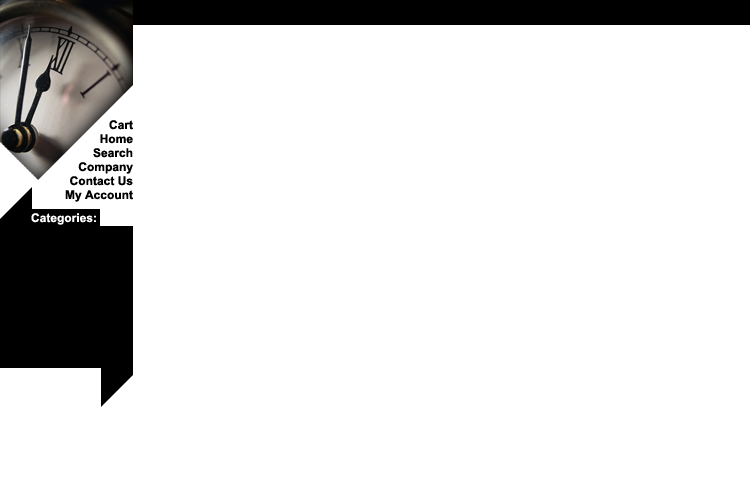
<style>
.page{position:relative;width:750px;height:500px;background:#ffffff}
.page>*{position:absolute;margin:0}
.t1{font:12px/14px "Arial-BoldMT";color:#000000}
.t2{font:12px "Arial-BoldMT";color:#ffffff}
</style>
<div class="page">
<p class="t1" style="left:65px;top:120px;width:68px;height:82px;text-align:right">Cart<br>Home<br>Search<br>Company<br>Contact Us<br>My Account</p>
<p class="t2" style="left:31px;top:213px;width:65px;height:12px">Categories:</p>
</div>
